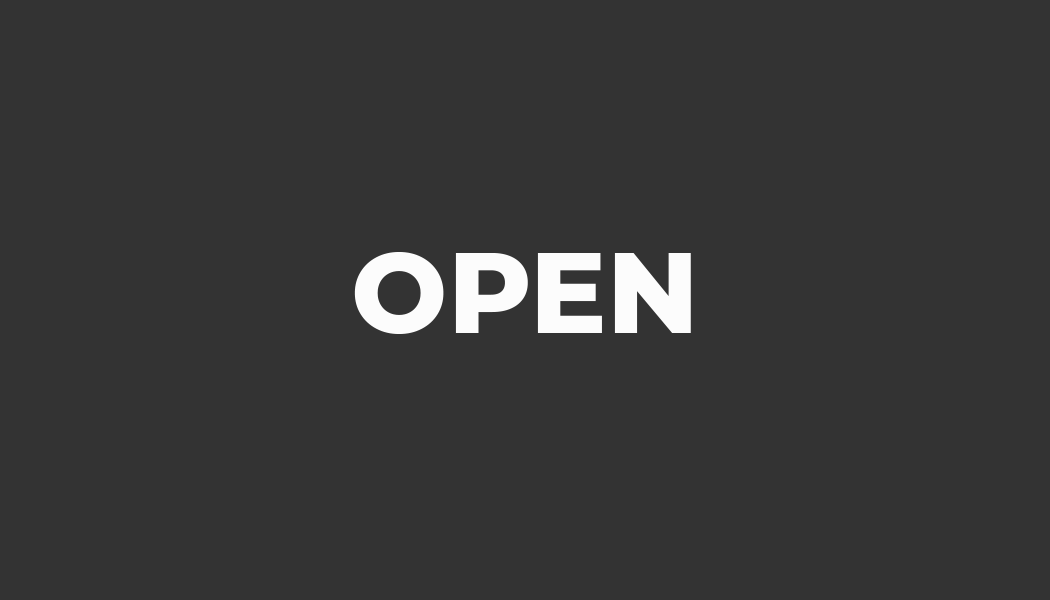
<style>
.page{position:relative;width:1050px;height:600px;background:#333333}
.page>*{position:absolute;margin:0}
.t1{font:113.8px "Montserrat-ExtraBold";color:#fcfcfc}
</style>
<div class="page">
<p class="t1" style="left:354px;top:252px;width:337px;height:82px">OPEN</p>
</div>
